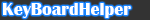
<style>
.page{position:relative;width:150px;height:20px;background:#333333}
.page>*{position:absolute;margin:0}
.t1{font:18px "BritannicBold";color:#ffffff}
</style>
<div class="page">
<p class="t1" style="left:3px;top:3px;width:128px;height:15px">KeyBoardHelper</p>
</div>
